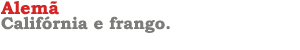
<style>
.page{position:relative;width:300px;height:50px;background:#ffffff}
.page>*{position:absolute;margin:0}
.t1{font:18px "BookmanOldStyle-Bold";color:#d42525}
.t2{font:17px "BookmanOldStyle-Bold";color:#7c7c79}
</style>
<div class="page">
<p class="t1" style="left:1px;top:1px;width:58px;height:14px">Alemã</p>
<p class="t2" style="left:1px;top:16px;width:169px;height:17px">Califórnia e frango.</p>
</div>
